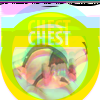
<style>
.page{position:relative;width:100px;height:100px}
.page>*{position:absolute;margin:0}
.t1{font:20.8px "MyriadPro-BoldCond"}
</style>
<div class="page">
<p class="t1" style="left:28px;top:19px;width:43px;height:14px">CHEST</p>
</div>
